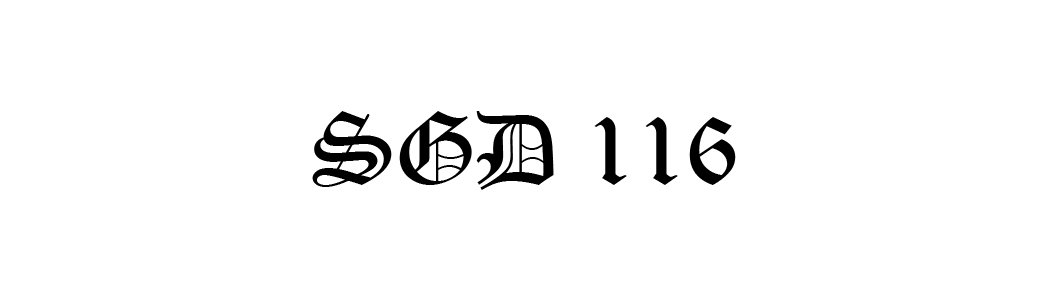
<style>
.page{position:relative;width:1050px;height:300px;background:#ffffff}
.page>*{position:absolute;margin:0}
.t1{font:100px "OldEnglishTextMT";color:#000000}
</style>
<div class="page">
<p class="t1" style="left:312px;top:111px;width:424px;height:79px">SGD 116</p>
</div>
